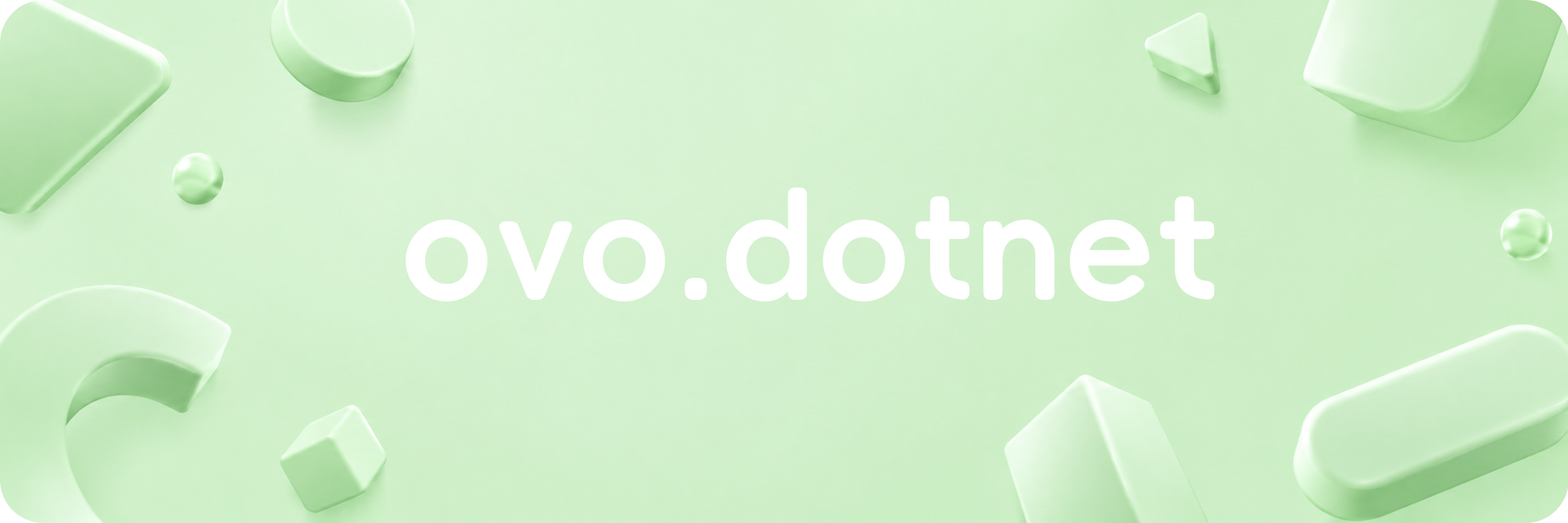
<style>
.page{position:relative;width:1568px;height:523px}
.page>*{position:absolute;margin:0}
.t1{font:148px "AlimamaFangYuanTi-Bold";color:#ffffff}
</style>
<div class="page">
<p class="t1" style="left:406px;top:187px;width:808px;height:115px">ovo.dotnet</p>
</div>
